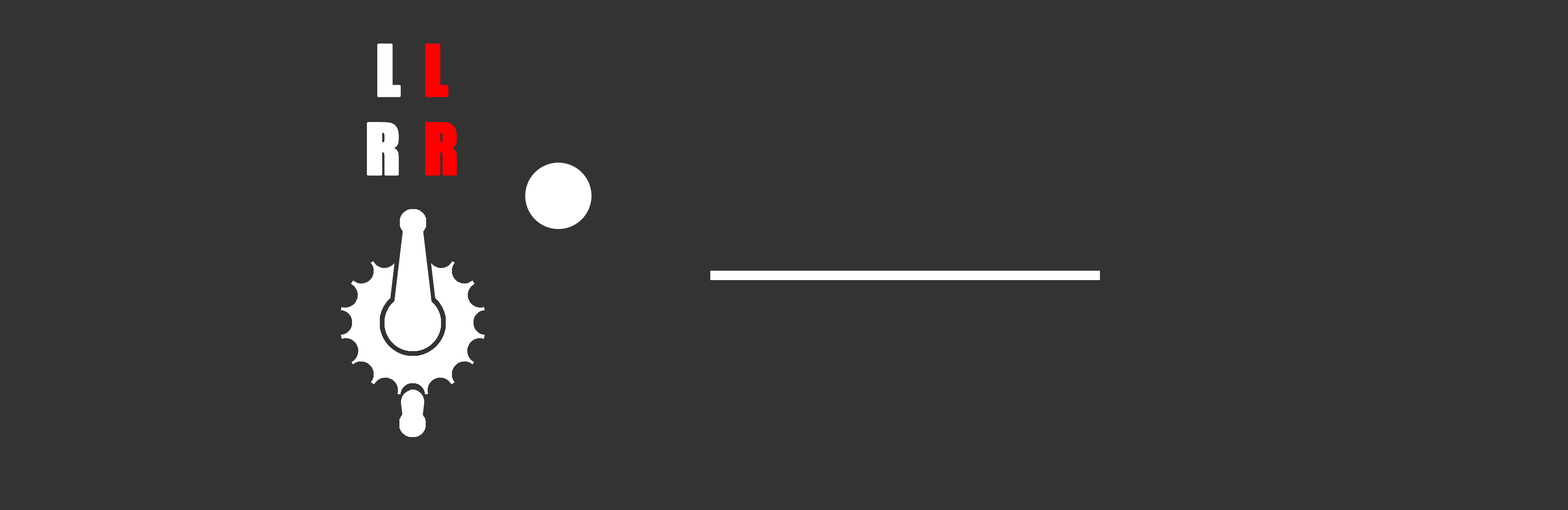
<style>
.page{position:relative;width:1568px;height:510px;background:#333333}
.page>*{position:absolute;margin:0}
.t1{font:65.3px "Impact";letter-spacing:0.06em;color:#ffffff;font-weight:bold}
.t2{font:65.3px "Impact";letter-spacing:0.06em;color:#ff0000;font-weight:bold}
</style>
<div class="page">
<p class="t1" style="left:367px;top:44px;width:90px;height:132px;text-align:center">L <span class="t2">L<br></span>R<span class="t2"> R</span></p>
</div>
